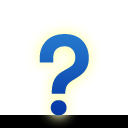
<style>
.page{position:relative;width:128px;height:128px;background:#ffffff}
.page>*{position:absolute;margin:0}
.t1{font:113.3px "Stellar-Medium";letter-spacing:-0.08em;color:#1c66c2;text-transform:uppercase;font-weight:bold;scale:1.1 1}
</style>
<div class="page">
<p class="t1" style="left:39px;top:34px;width:50px;height:82px">?</p>
</div>
